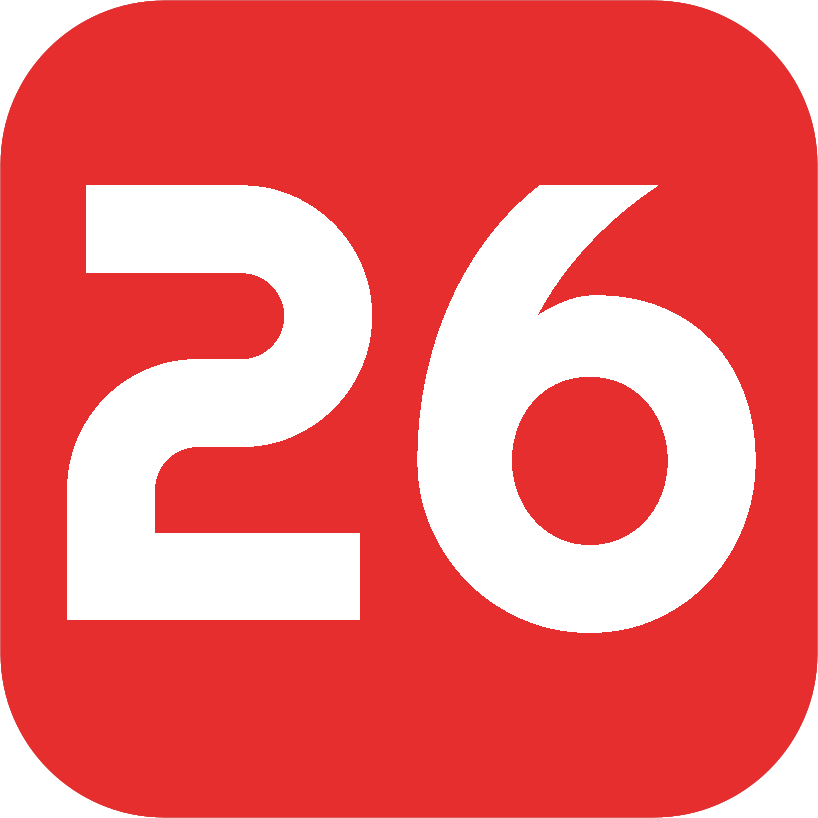
<style>
.page{position:relative;width:818px;height:818px;background:#e72e2e}
.page>*{position:absolute;margin:0}
.t1{font:620px "Righteous-Regular";color:#ffffff}
</style>
<div class="page">
<p class="t1" style="left:67px;top:185px;width:689px;height:448px">26</p>
</div>
